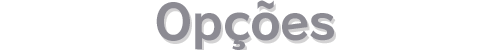
<style>
.page{position:relative;width:490px;height:50px;background:#ffffff}
.page>*{position:absolute;margin:0}
.t1{font:48px "RodinPro-B";letter-spacing:-0.016em;color:#8c8b93}
</style>
<div class="page">
<p class="t1" style="left:156px;top:0px;width:178px;height:50px">Opções</p>
</div>
